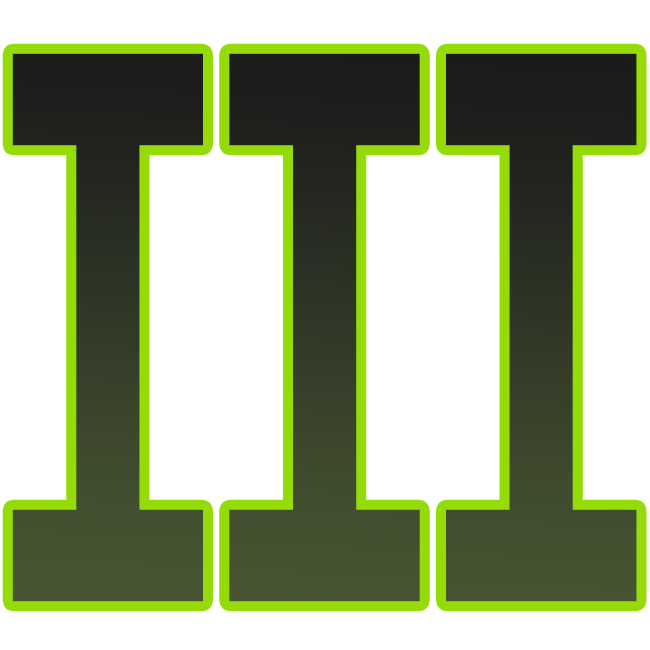
<style>
.page{position:relative;width:650px;height:650px;background:#ffffff}
.page>*{position:absolute;margin:0}
.t1{font:657.1px "Russian";scale:0.7 1}
</style>
<div class="page">
<p class="t1" style="left:12px;top:53px;width:625px;height:549px">III</p>
</div>
